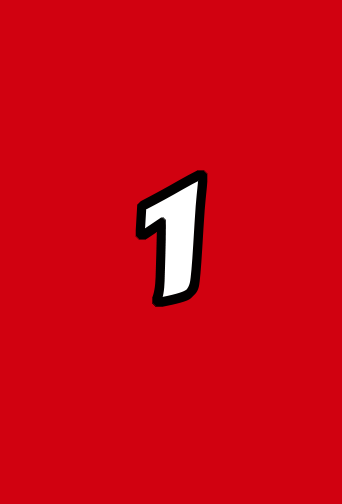
<style>
.page{position:relative;width:342px;height:504px;background:#d10110}
.page>*{position:absolute;margin:0}
.t1{font:200px "MaturaMTScriptCapitals";color:#fffdfd}
</style>
<div class="page">
<p class="t1" style="left:141px;top:176px;width:61px;height:125px">1</p>
</div>
